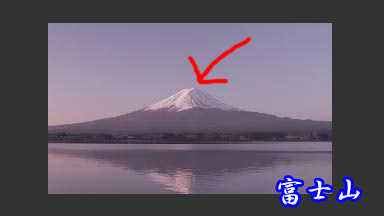
<style>
.page{position:relative;width:384px;height:216px;background:#333333}
.page>*{position:absolute;margin:0}
.t1{font:30px "DFSNGyoSho-W5-MP-RKSJ-H";color:#ffffff}
</style>
<div class="page">
<p class="t1" style="left:278px;top:178px;width:82px;height:27px">富士山</p>
</div>
